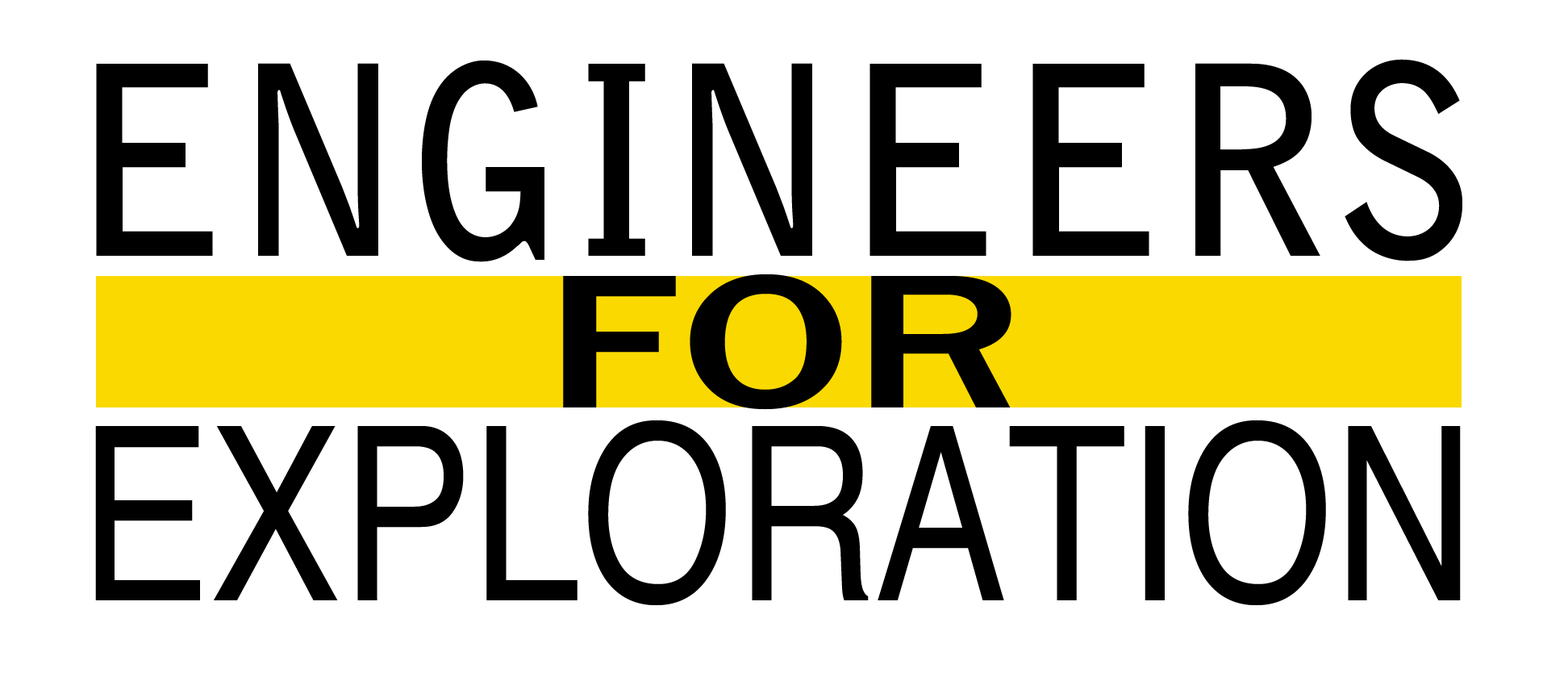
<style>
.page{position:relative;width:1568px;height:681px;background:#ffffff}
.page>*{position:absolute;margin:0}
.t1{font:262px "BellGothicStd-Bold";color:#000000;scale:0.93 1}
.t2{font:197.7px "FranklinGothic-Medium";color:#000000;scale:1.35 1}
.t3{font:242.8px "Helvetica";color:#000000;scale:0.81 1}
</style>
<div class="page">
<p class="t1" style="left:96px;top:59px;width:1366px;height:203px">ENGINEERS</p>
<p class="t2" style="left:563px;top:274px;width:448px;height:136px">FOR</p>
<p class="t3" style="left:95px;top:420px;width:1366px;height:186px">EXPLORATION</p>
</div>
